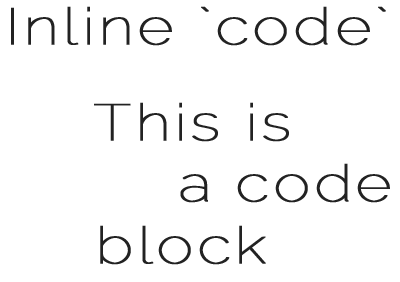
<style>
.page{position:relative;width:400px;height:282px;background:#ffffff}
.page>*{position:absolute;margin:0}
.t1{font:51.1px "Raleway-Thin";letter-spacing:0.05em;color:#222222;font-weight:bold;scale:1.2 1}
</style>
<div class="page">
<p class="t1" style="left:11px;top:6px;width:375px;height:40px">Inline `code`</p>
<p class="t1" style="left:94px;top:102px;width:296px;height:163px">This is<br>        a code<br>    block</p>
</div>
